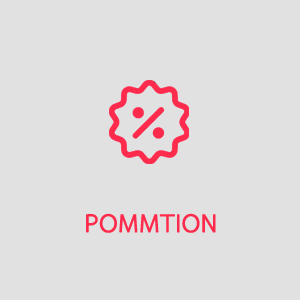
<style>
.page{position:relative;width:300px;height:300px;background:#e1e1e1}
.page>*{position:absolute;margin:0}
.t1{font:36px "THSarabunPSK";letter-spacing:0.01em;color:#ff2b4c;font-weight:bold}
</style>
<div class="page">
<p class="t1" style="left:86px;top:213px;width:130px;height:20px">POMMTION</p>
</div>
